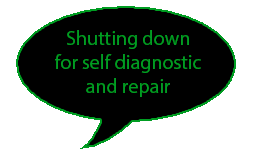
<style>
.page{position:relative;width:257px;height:151px;background:#ffffff}
.page>*{position:absolute;margin:0}
.t1{font:20px "MyriadPro-Regular";color:#009d22}
</style>
<div class="page">
<p class="t1" style="left:55px;top:30px;width:146px;height:67px;text-align:center">Shutting down<br>for self diagnostic<br>and repair</p>
</div>
